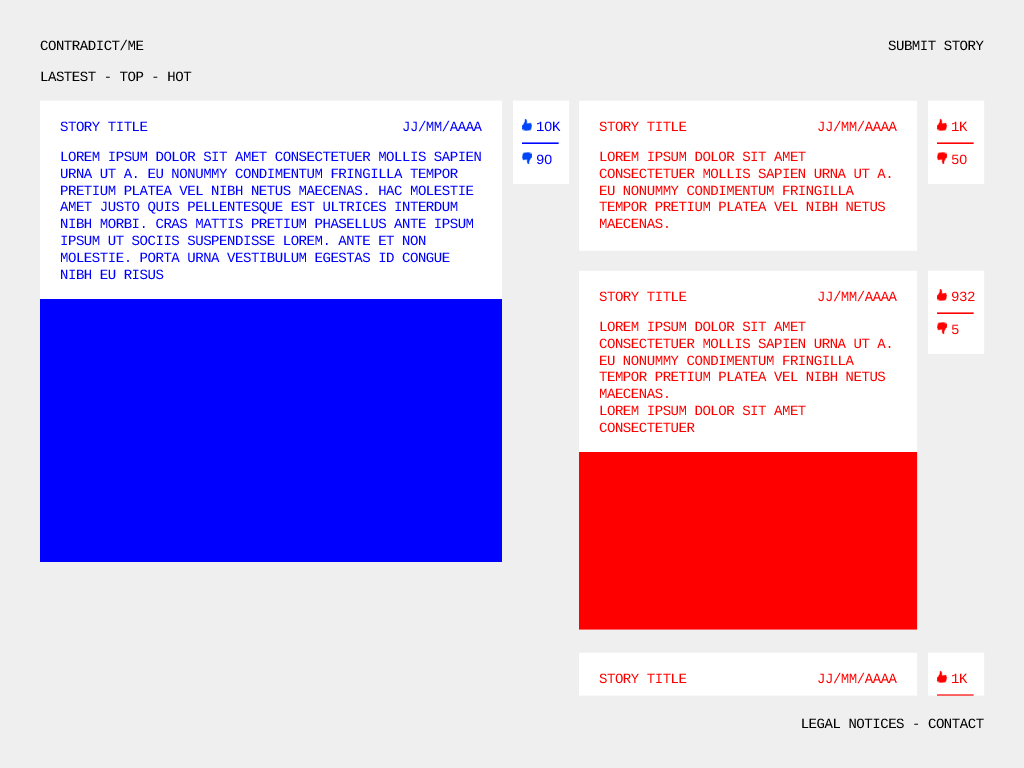
<style>
.page{position:relative;width:1024px;height:768px;background:#efefef}
.page>*{position:absolute;margin:0}
.t1{font:14px "LiberationMono";letter-spacing:-0.032em;color:#000000;text-transform:uppercase}
.t2{font:14px "LiberationMono";letter-spacing:-0.032em;color:#0000ff;text-transform:uppercase}
.t3{font:14px "LiberationMono";letter-spacing:-0.032em;color:#ff0000;text-transform:uppercase}
.t4{font:14px/16.8px "LiberationMono";letter-spacing:-0.032em;color:#0000ff;text-transform:uppercase}
.t5{font:14px/16.8px "LiberationMono";letter-spacing:-0.032em;color:#ff0000;text-transform:uppercase}
</style>
<div class="page">
<p class="t1" style="left:40px;top:39px;width:104px;height:12px">contradict/ME</p>
<p class="t1" style="left:888px;top:40px;width:96px;height:11px">SUBMIT STORY</p>
<p class="t1" style="left:41px;top:71px;width:151px;height:11px">LASTEST - TOP - HOT</p>
<p class="t2" style="left:60px;top:121px;width:88px;height:11px">STORY TITLE</p>
<p class="t2" style="left:403px;top:120px;width:79px;height:12px">JJ/MM/AAAA</p>
<p class="t2" style="left:537px;top:121px;width:24px;height:11px">10K</p>
<p class="t3" style="left:599px;top:121px;width:88px;height:11px">STORY TITLE</p>
<p class="t3" style="left:818px;top:120px;width:79px;height:12px">JJ/MM/AAAA</p>
<p class="t3" style="left:952px;top:121px;width:16px;height:10px">1K</p>
<p class="t4" style="left:60px;top:151px;width:421px;height:129px">Lorem ipsum dolor sit amet consectetuer mollis sapien<br>urna ut a. Eu nonummy condimentum fringilla tempor <br>pretium platea vel nibh netus Maecenas. Hac molestie <br>amet justo quis pellentesque est ultrices interdum <br>nibh Morbi. Cras mattis pretium Phasellus ante ipsum <br>ipsum ut sociis Suspendisse Lorem. Ante et non <br>molestie. Porta urna Vestibulum egestas id congue <br>nibh eu risus</p>
<p class="t2" style="left:537px;top:154px;width:15px;height:11px">90</p>
<p class="t5" style="left:599px;top:151px;width:292px;height:78px">Lorem ipsum dolor sit amet <br>consectetuer mollis sapien urna ut a. <br>Eu nonummy condimentum fringilla <br>tempor pretium platea vel nibh netus <br>Maecenas.</p>
<p class="t3" style="left:952px;top:154px;width:15px;height:11px">50</p>
<p class="t3" style="left:599px;top:291px;width:88px;height:11px">STORY TITLE</p>
<p class="t3" style="left:818px;top:290px;width:79px;height:12px">JJ/MM/AAAA</p>
<p class="t3" style="left:952px;top:291px;width:23px;height:11px">932</p>
<p class="t5" style="left:599px;top:321px;width:292px;height:112px">Lorem ipsum dolor sit amet <br>consectetuer mollis sapien urna ut a. <br>Eu nonummy condimentum fringilla <br>tempor pretium platea vel nibh netus <br>Maecenas. <br>Lorem ipsum dolor sit amet <br>consectetuer</p>
<p class="t3" style="left:952px;top:324px;width:7px;height:11px">5</p>
<p class="t3" style="left:599px;top:673px;width:88px;height:11px">STORY TITLE</p>
<p class="t3" style="left:818px;top:672px;width:79px;height:12px">JJ/MM/AAAA</p>
<p class="t3" style="left:952px;top:673px;width:16px;height:10px">1K</p>
<p class="t1" style="left:802px;top:718px;width:182px;height:11px">LEGAL NOTICES - CONTACT</p>
</div>
